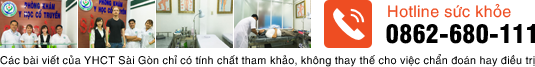
<style>
.page{position:relative;width:535px;height:67px;background:#ffffff}
.page>*{position:absolute;margin:0}
.t1{font:16px "UTM-Helve";color:#ee4d22}
.t2{font:25px "UTM-Swiss-721-Black-Condensed";color:#000000}
.t3{font:10.8px "UTM-Helve";color:#000000}
</style>
<div class="page">
<p class="t1" style="left:388px;top:3px;width:123px;height:15px">Hotline sức khỏe</p>
<p class="t2" style="left:386px;top:24px;width:149px;height:20px">0862-680-111</p>
<p class="t3" style="left:0px;top:54px;width:535px;height:13px">Các bài viết của YHCT Sài Gòn chỉ có tính chất tham khảo, không thay thế cho việc chẩn đoán hay điều trị</p>
</div>
